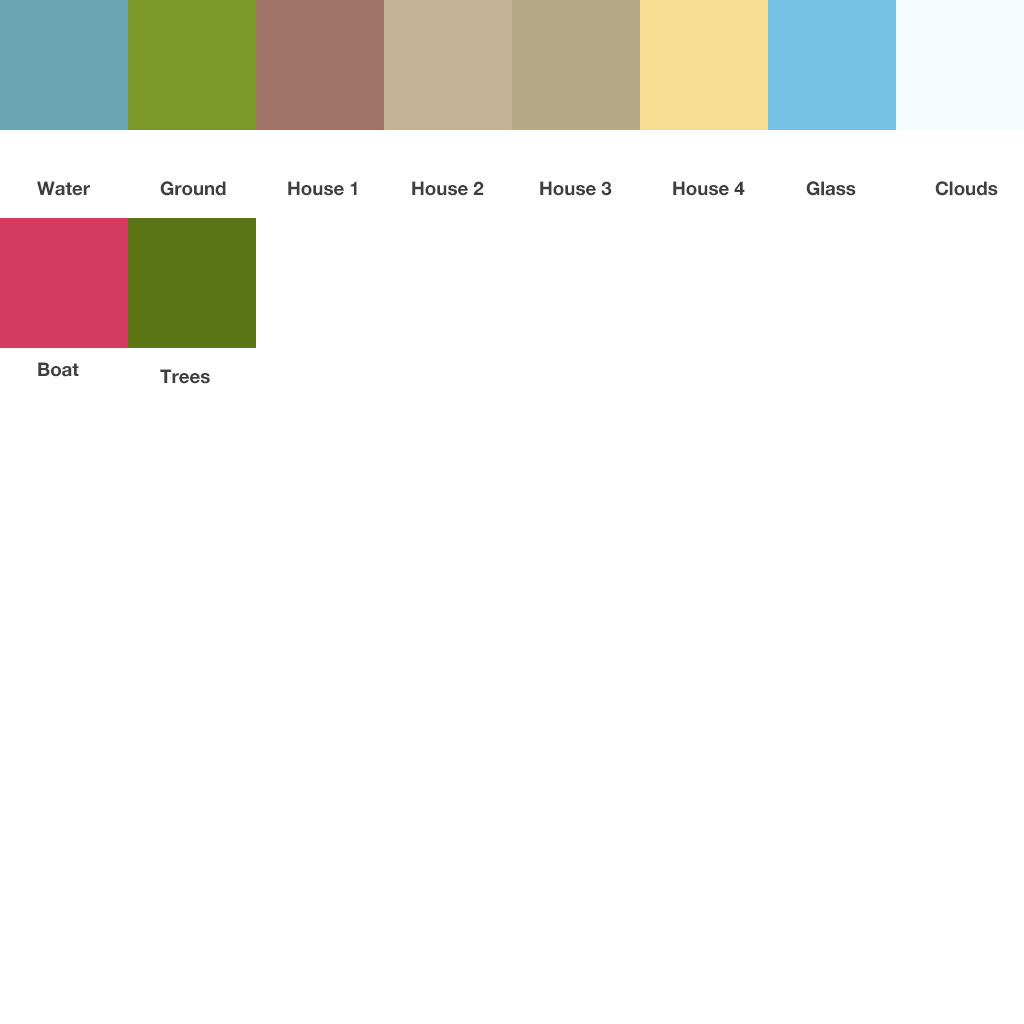
<style>
.page{position:relative;width:1024px;height:1024px;background:#ffffff}
.page>*{position:absolute;margin:0}
.t1{font:18.7px "HelveticaNeueBold";color:#413d3d}
</style>
<div class="page">
<p class="t1" style="left:37px;top:181px;width:53px;height:15px">Water</p>
<p class="t1" style="left:160px;top:181px;width:66px;height:15px">Ground</p>
<p class="t1" style="left:288px;top:181px;width:69px;height:15px">House 1</p>
<p class="t1" style="left:412px;top:181px;width:72px;height:15px">House 2</p>
<p class="t1" style="left:540px;top:181px;width:72px;height:15px">House 3</p>
<p class="t1" style="left:673px;top:181px;width:72px;height:15px">House 4</p>
<p class="t1" style="left:806px;top:181px;width:50px;height:15px">Glass</p>
<p class="t1" style="left:935px;top:181px;width:63px;height:15px">Clouds</p>
<p class="t1" style="left:38px;top:362px;width:41px;height:15px">Boat</p>
<p class="t1" style="left:160px;top:369px;width:50px;height:15px">Trees</p>
</div>
